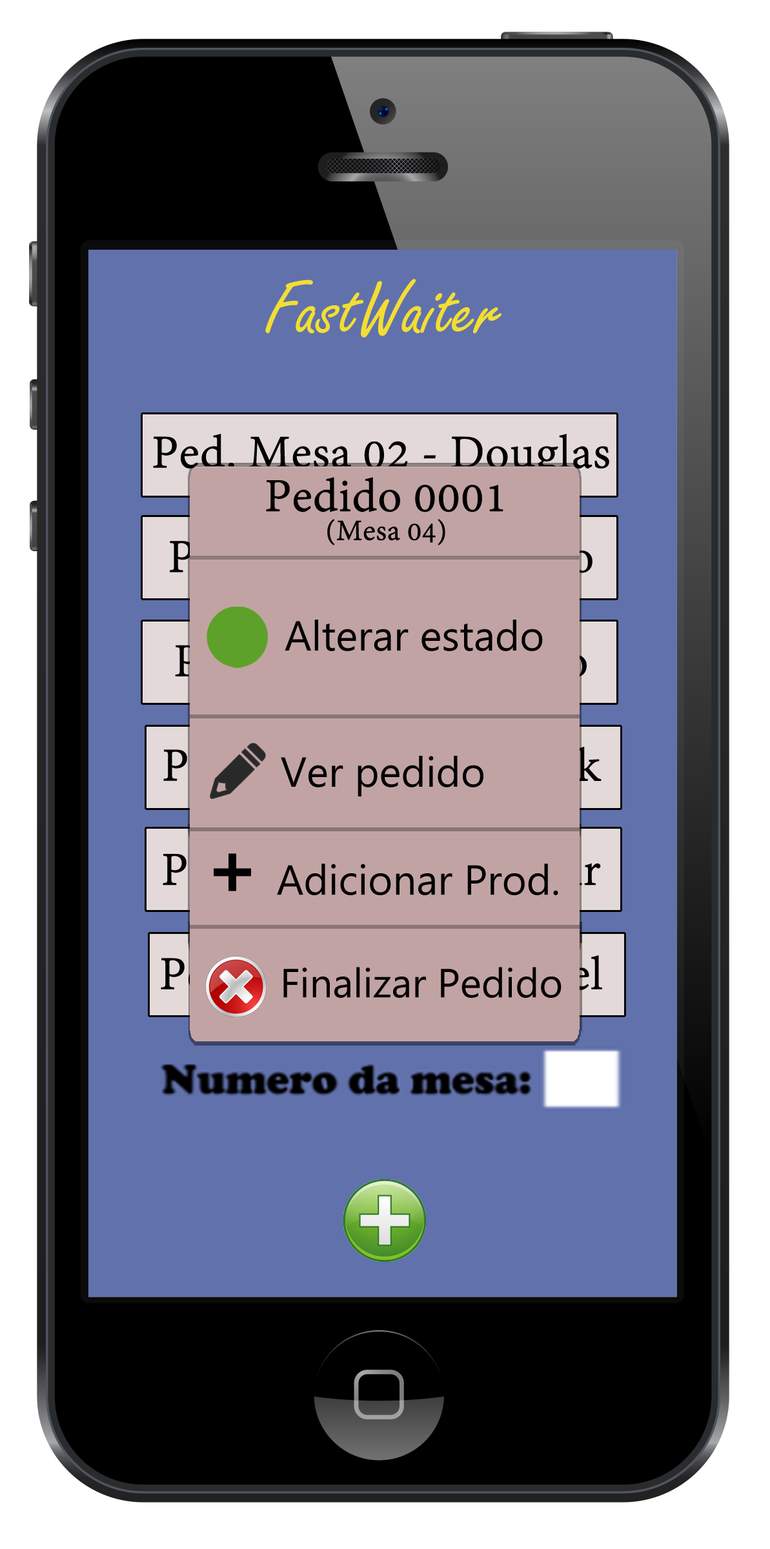
<style>
.page{position:relative;width:770px;height:1549px;background:#6171ac}
.page>*{position:absolute;margin:0}
.t1{font:80.7px "FreestyleScript-Regular";color:#f2de32}
.t2{font:51px "AdobeDevanagari-Regular";color:#000000;font-weight:bold}
.t3{font:31.6px "AdobeDevanagari-Regular";color:#000000;font-weight:bold}
.t4{font:41.9px "Ebrima";color:#010002}
.t5{font:67.8px "ForteMT";color:#010002;font-weight:bold}
.t6{font:40.7px "Ebrima";color:#010002}
</style>
<div class="page">
<p class="t1" style="left:265px;top:279px;width:236px;height:59px">FastWaiter</p>
<p class="t2" style="left:266px;top:477px;width:237px;height:68px;text-align:center">Pedido 0001<br><span class="t3">(Mesa 04)</span></p>
<p class="t4" style="left:285px;top:620px;width:258px;height:31px">Alterar estado</p>
<p class="t4" style="left:281px;top:756px;width:202px;height:40px">Ver pedido</p>
<p class="t4" style="left:214px;top:853px;width:344px;height:42px"><span class="t5">+ </span>Adicionar Prod.</p>
<p class="t6" style="left:283px;top:967px;width:278px;height:31px">Finalizar Pedido</p>
</div>
